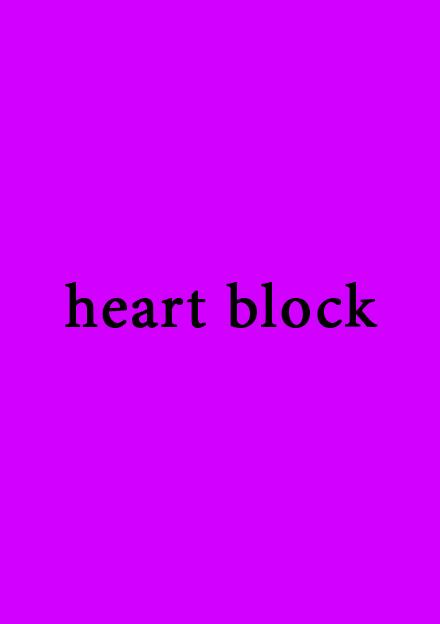
<style>
.page{position:relative;width:440px;height:624px;background:#d200ff}
.page>*{position:absolute;margin:0}
.t1{font:75px "AdobeThai-Regular";letter-spacing:0.02em;color:#000000;font-weight:bold}
</style>
<div class="page">
<p class="t1" style="left:65px;top:282px;width:313px;height:46px">heart block</p>
</div>
